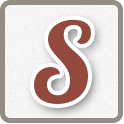
<style>
.page{position:relative;width:124px;height:124px}
.page>*{position:absolute;margin:0}
.t1{font:110px "Lobster1.4";color:#94493d}
</style>
<div class="page">
<p class="t1" style="left:34px;top:19px;width:57px;height:85px">S</p>
</div>
